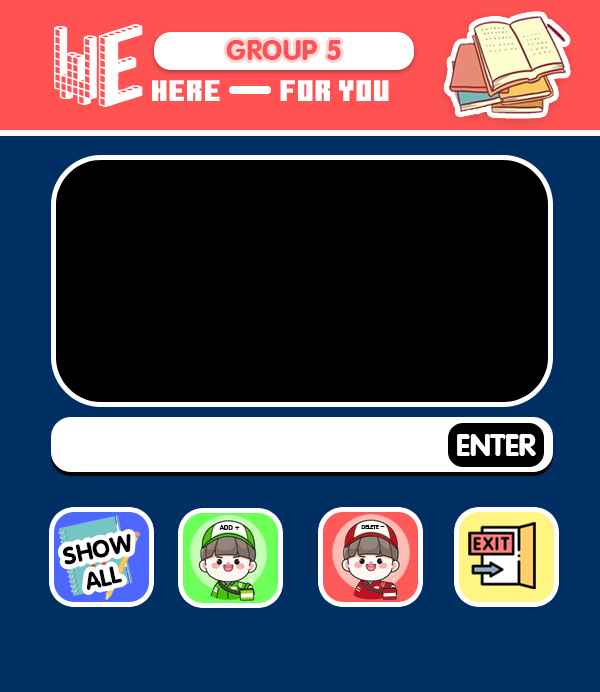
<style>
.page{position:relative;width:600px;height:692px;background:#002f64}
.page>*{position:absolute;margin:0}
.t1{font:84.9px "Blox-(BRK";color:#ffffff;scale:1.05 1}
.t2{font:41.7px "DSNSuKumWit";color:#ff5353}
.t3{font:29.8px "MinecraftTen";color:#ffffff}
.t4{font:45px "DSNSuKumWit";color:#ffffff}
.t5{font:36.4px/28.6px "DSNSuKumWit";color:#000000}
.t6{font:9.9px "DSNSuKumWit";color:#000000}
.t7{font:8.6px "DSNSuKumWit";color:#000000}
</style>
<div class="page">
<p class="t1" style="left:54px;top:24px;width:89px;height:83px">We</p>
<p class="t2" style="left:226px;top:40px;width:115px;height:20px">GROUP 5</p>
<p class="t3" style="left:152px;top:80px;width:68px;height:21px">Here</p>
<p class="t3" style="left:280px;top:80px;width:109px;height:21px">for you</p>
<p class="t4" style="left:457px;top:434px;width:79px;height:22px">ENTER</p>
<p class="t5" style="left:63px;top:534px;width:68px;height:56px;text-align:center;rotate:-11deg">SHOW<br>ALL</p>
<p class="t6" style="left:219px;top:525px;width:21px;height:5px">ADD +</p>
<p class="t7" style="left:361px;top:525px;width:24px;height:4px">DELETE -</p>
</div>
